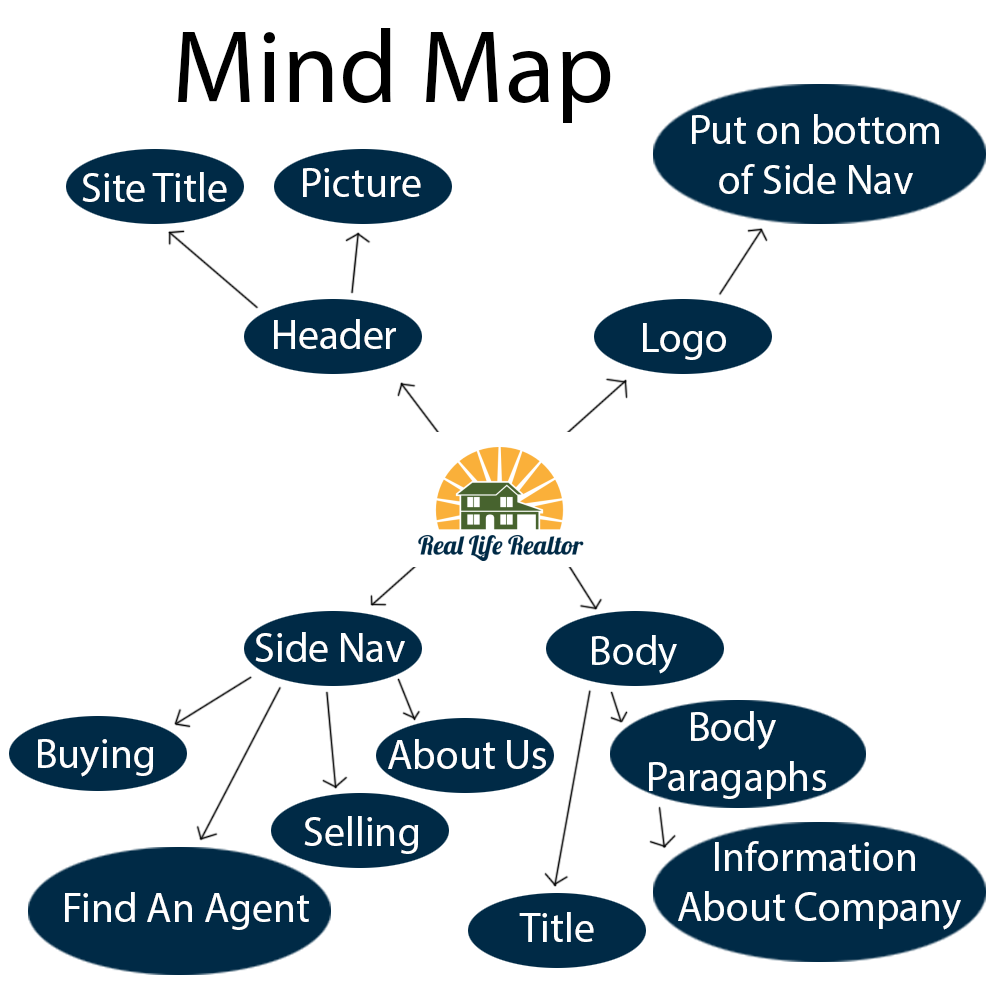
<style>
.page{position:relative;width:1000px;height:1000px;background:#ffffff}
.page>*{position:absolute;margin:0}
.t1{font:104.2px "MyriadPro-Regular";color:#000000}
.t2{font:41.7px "MyriadPro-Regular";color:#ffffff}
</style>
<div class="page">
<p class="t1" style="left:178px;top:28px;width:433px;height:95px">Mind Map</p>
<p class="t2" style="left:692px;top:114px;width:247px;height:80px;text-align:center">Put on bottom<br>of Side Nav</p>
<p class="t2" style="left:82px;top:172px;width:145px;height:30px">Site Title</p>
<p class="t2" style="left:303px;top:168px;width:118px;height:29px">Picture</p>
<p class="t2" style="left:274px;top:319px;width:122px;height:30px">Header</p>
<p class="t2" style="left:643px;top:323px;width:83px;height:37px">Logo</p>
<p class="t2" style="left:255px;top:632px;width:150px;height:30px">Side Nav</p>
<p class="t2" style="left:649px;top:711px;width:177px;height:88px;text-align:center">Body <br>Paragaphs</p>
<p class="t2" style="left:38px;top:739px;width:116px;height:38px">Buying</p>
<p class="t2" style="left:388px;top:739px;width:158px;height:30px">About Us</p>
<p class="t2" style="left:304px;top:816px;width:115px;height:38px">Selling</p>
<p class="t2" style="left:678px;top:841px;width:283px;height:89px;text-align:center">Information <br>About Company</p>
<p class="t2" style="left:65px;top:892px;width:244px;height:38px">Find An Agent</p>
<p class="t2" style="left:519px;top:912px;width:75px;height:30px">Title</p>
</div>
